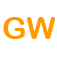
<style>
.page{position:relative;width:57px;height:57px;background:#ffffff}
.page>*{position:absolute;margin:0}
.t1{font:30.6px "ArialRoundedMTBold";color:#ff9900}
</style>
<div class="page">
<p class="t1" style="left:3px;top:17px;width:52px;height:22px">GW</p>
</div>
